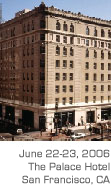
<style>
.page{position:relative;width:111px;height:189px}
.page>*{position:absolute;margin:0}
.t1{font:11px/13px "EurostileRegular";color:#666666;font-weight:bold}
</style>
<div class="page">
<p class="t1" style="left:19px;top:149px;width:91px;height:36px;text-align:right">June 22-23, 2006<br>The Palace Hotel<br>San Francisco, CA</p>
</div>
